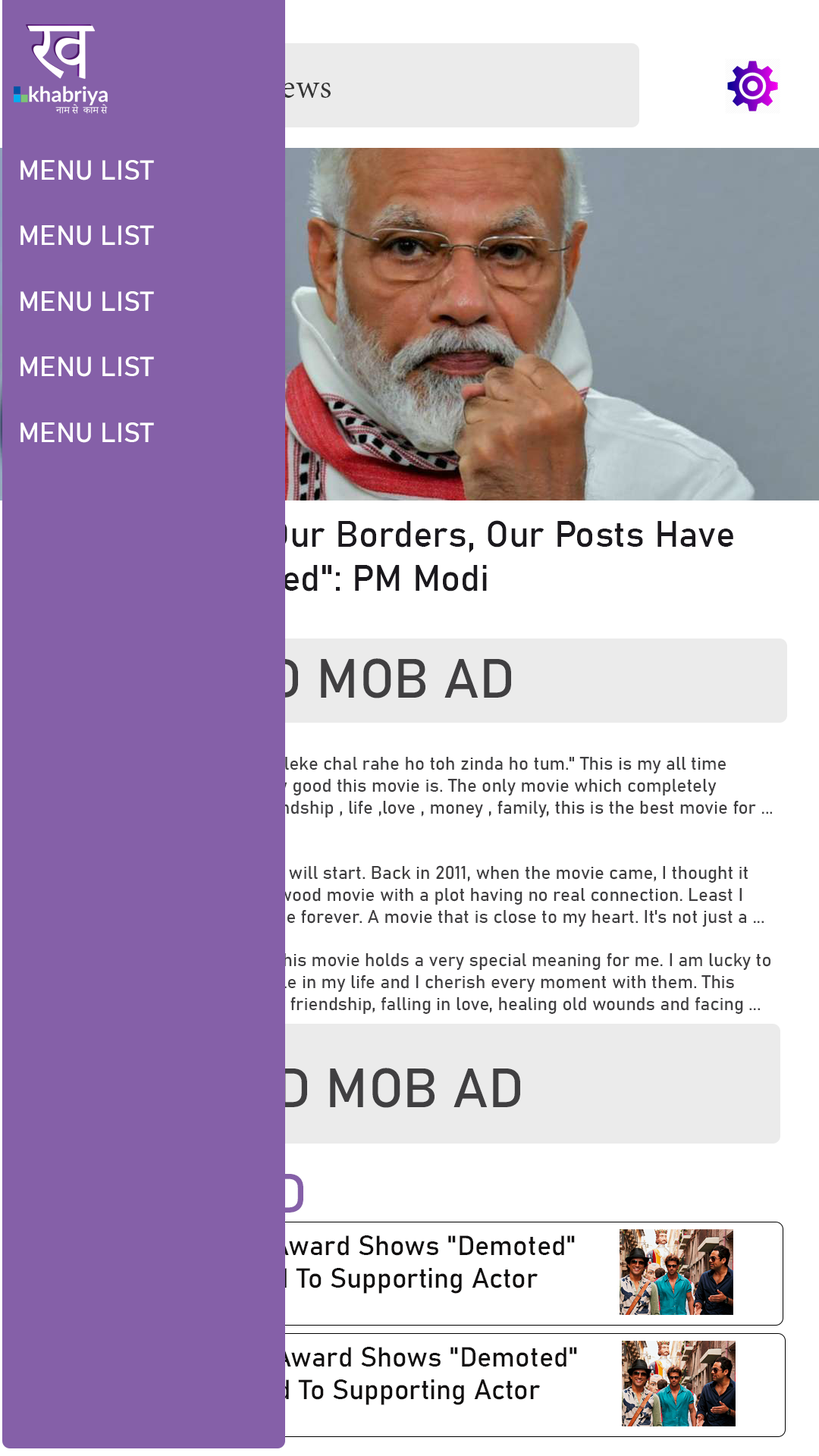
<style>
.page{position:relative;width:819px;height:1456px;background:#8560a8}
.page>*{position:absolute;margin:0}
.t1{font:36.4px "AdobeDevanagari-Regular";color:#8560a8}
.t2{font:27.3px "Bahnschrift";color:#ffffff}
.t3{font:36.4px "Bahnschrift"}
.t4{font:54.6px "Bahnschrift";color:#403f41}
.t5{font:18.2px "Bahnschrift";color:#403f41}
.t6{font:27.3px "Bahnschrift"}
</style>
<div class="page">
<p class="t1" style="left:161px;top:74px;width:170px;height:24px">Search News</p>
<p class="t2" style="left:20px;top:160px;width:134px;height:283px">MENU LIST<br><br>MENU LIST<br><br>MENU LIST<br><br>MENU LIST<br><br>MENU LIST</p>
<p class="t3" style="left:15px;top:520px;width:718px;height:78px">"Nobody Inside Our Borders, Our Posts Have <br>Not Been Occupied": PM Modi</p>
<p class="t4" style="left:231px;top:658px;width:280px;height:40px">AD MOB AD</p>
<p class="t5" style="left:27px;top:757px;width:745px;height:257px">"Dilon mein tum apni betabiyan leke chal rahe ho toh zinda ho tum." This is my all time favorite movie.I can't praise how good this movie is. The only movie which completely describes about problems , friendship , life ,love , money , family, this is the best movie for ...<br><br>    <br>I really don't know from where I will start. Back in 2011, when the movie came, I thought it would be another masala Bollywood movie with a plot having no real connection. Least I knew, it will be my favorite movie forever. A movie that is close to my heart. It's not just a ...<br><br>One of my "Must Like" movies, this movie holds a very special meaning for me. I am lucky to have a few very important people in my life and I cherish every moment with them. This movie is all about that. Its about friendship, falling in love, healing old wounds and facing ...</p>
<p class="t4" style="left:240px;top:1068px;width:280px;height:40px">AD MOB AD</p>
<p class="t6" style="left:23px;top:1235px;width:552px;height:59px">Abhay Deol Reveals Award Shows "Demoted" <br>Him From ZNMD Lead To Supporting Actor</p>
<p class="t6" style="left:25px;top:1347px;width:552px;height:58px">Abhay Deol Reveals Award Shows "Demoted" <br>Him From ZNMD Lead To Supporting Actor</p>
</div>
